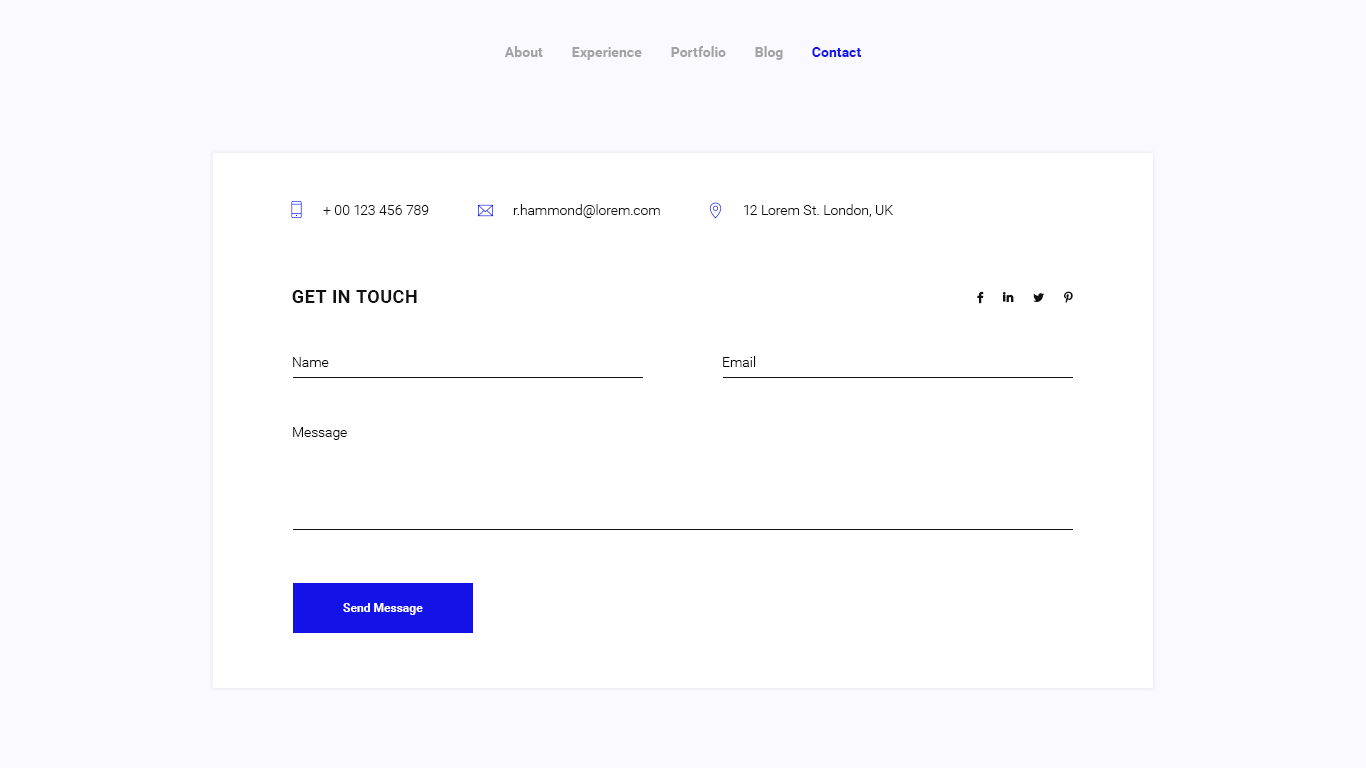
<style>
.page{position:relative;width:1366px;height:768px;background:#f9f9ff}
.page>*{position:absolute;margin:0}
.t1{font:14px "Roboto-Bold";color:#a2a2a6}
.t2{font:14px "Roboto-Bold";color:#1313e8}
.t3{font:14px "Roboto-Light";color:#111111}
.t4{font:18px "Roboto-Bold";letter-spacing:0.025em;color:#111111;text-transform:uppercase}
.t5{font:14px "Roboto-Light";color:#000000}
.t6{font:12px "Roboto-Bold";color:#ffffff}
</style>
<div class="page">
<p class="t1" style="left:504px;top:46px;width:39px;height:11px">About</p>
<p class="t1" style="left:572px;top:47px;width:70px;height:13px">Experience</p>
<p class="t1" style="left:671px;top:46px;width:55px;height:11px">Portfolio</p>
<p class="t1" style="left:755px;top:46px;width:28px;height:14px">Blog</p>
<p class="t2" style="left:812px;top:47px;width:50px;height:10px">Contact</p>
<p class="t3" style="left:323px;top:205px;width:106px;height:10px">+ 00 123 456 789</p>
<p class="t3" style="left:513px;top:204px;width:147px;height:14px">r.hammond@lorem.com</p>
<p class="t3" style="left:744px;top:204px;width:149px;height:13px">12 Lorem St. London, UK</p>
<p class="t4" style="left:292px;top:290px;width:125px;height:13px">get in touch</p>
<p class="t5" style="left:293px;top:357px;width:36px;height:10px">Name</p>
<p class="t5" style="left:723px;top:356px;width:33px;height:11px">Email</p>
<p class="t5" style="left:293px;top:427px;width:54px;height:13px">Message</p>
<p class="t6" style="left:343px;top:603px;width:80px;height:12px">Send Message</p>
</div>
